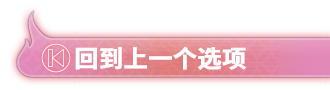
<style>
.page{position:relative;width:330px;height:90px;background:#ffffff}
.page>*{position:absolute;margin:0}
.t1{font:24px "SourceHanSansSC-Bold";color:#ffffff;font-weight:bold}
</style>
<div class="page">
<p class="t1" style="left:75px;top:46px;width:171px;height:24px">回到上一个选项</p>
</div>
